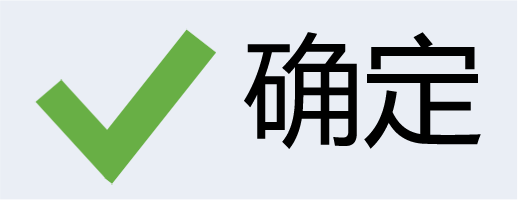
<style>
.page{position:relative;width:518px;height:200px;background:#eaeef5}
.page>*{position:absolute;margin:0}
.t1{font:119.4px "MicrosoftYaHei";color:#000000}
</style>
<div class="page">
<p class="t1" style="left:244px;top:32px;width:237px;height:117px">确定</p>
</div>
